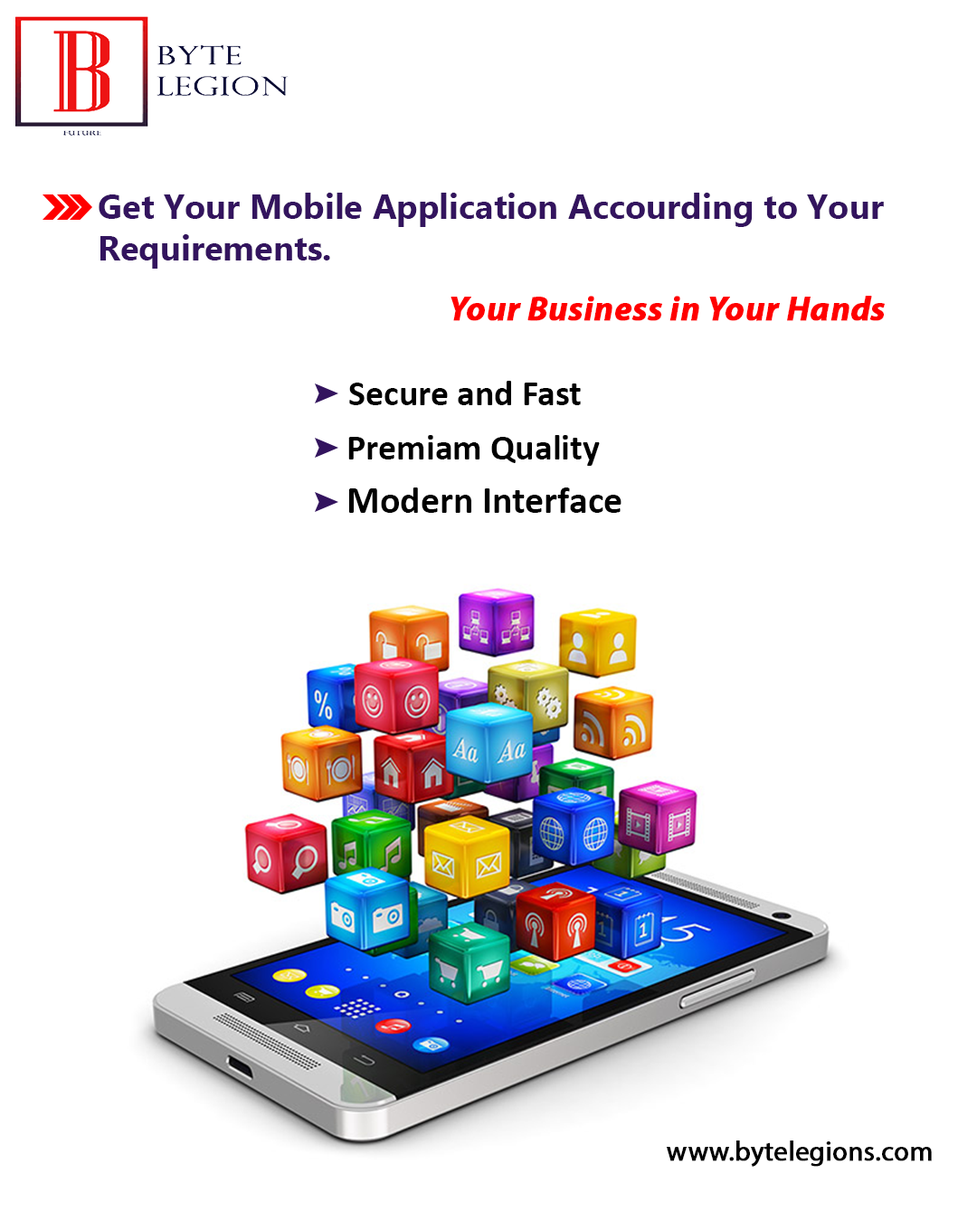
<style>
.page{position:relative;width:977px;height:1221px;background:#ffffff}
.page>*{position:absolute;margin:0}
.t1{font:34.4px "MyanmarText-Bold";color:#33145e}
.t2{font:34.4px "MyriadPro-BoldIt";color:#ff0000;font-weight:bold}
.t3{font:36.2px "Calibri-Bold";color:#000000}
.t4{font:38px "Calibri-Bold";color:#000000}
.t5{font:27.1px "MyriadPro-Regular";color:#000000;font-weight:bold}
</style>
<div class="page">
<p class="t1" style="left:99px;top:193px;width:785px;height:76px">Get Your Mobile Application Accourding to Your<br>Requirements.</p>
<p class="t2" style="left:450px;top:296px;width:434px;height:25px">Your Business in Your Hands</p>
<p class="t3" style="left:349px;top:381px;width:232px;height:24px">Secure and Fast</p>
<p class="t3" style="left:348px;top:435px;width:252px;height:31px">Premiam Quality</p>
<p class="t4" style="left:348px;top:487px;width:273px;height:26px">Modern Interface</p>
<p class="t5" style="left:667px;top:1140px;width:264px;height:27px">www.bytelegions.com</p>
</div>
